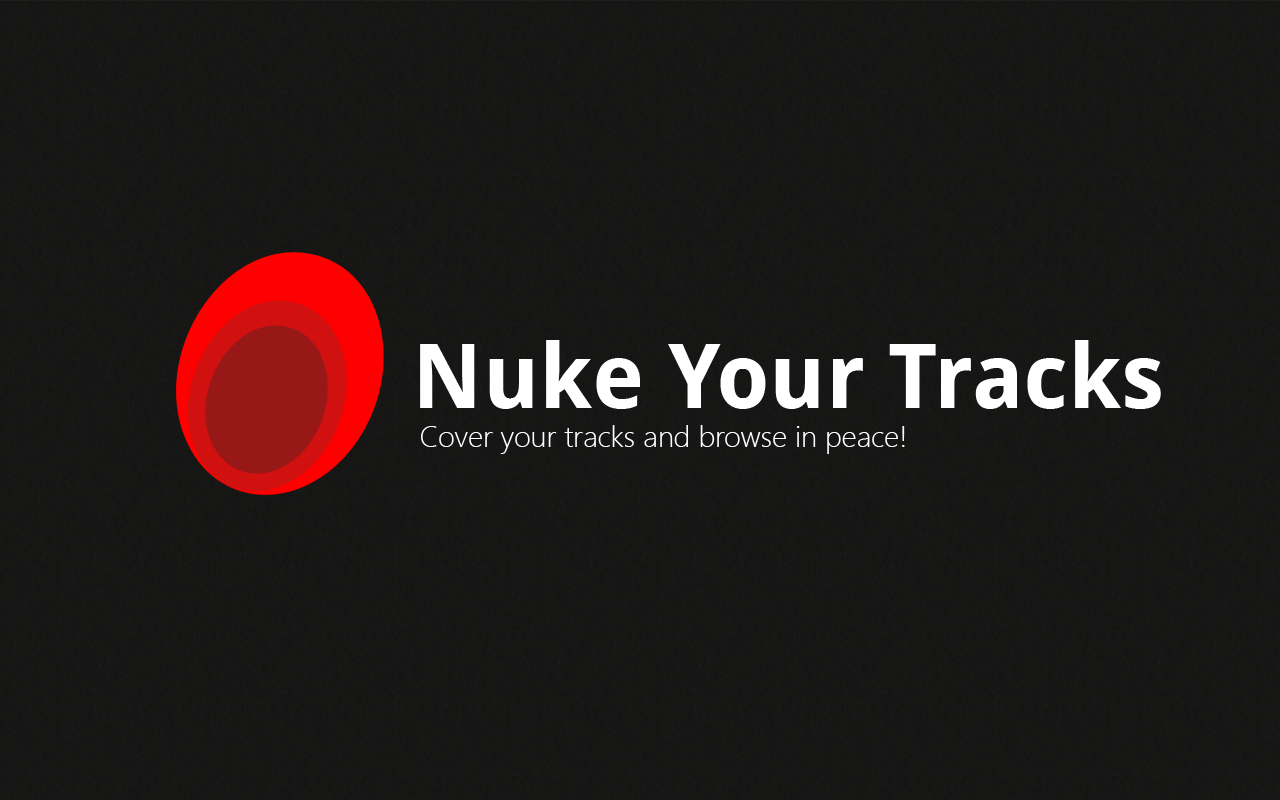
<style>
.page{position:relative;width:1280px;height:800px}
.page>*{position:absolute;margin:0}
.t1{font:89.8px "DroidSans-Bold";color:#ffffff}
.t2{font:29.5px "SegoeUI-Light";color:#ffffff}
</style>
<div class="page">
<p class="t1" style="left:420px;top:340px;width:741px;height:69px">Nuke Your Tracks</p>
<p class="t2" style="left:421px;top:425px;width:484px;height:29px">Cover your tracks and browse in peace!</p>
</div>
